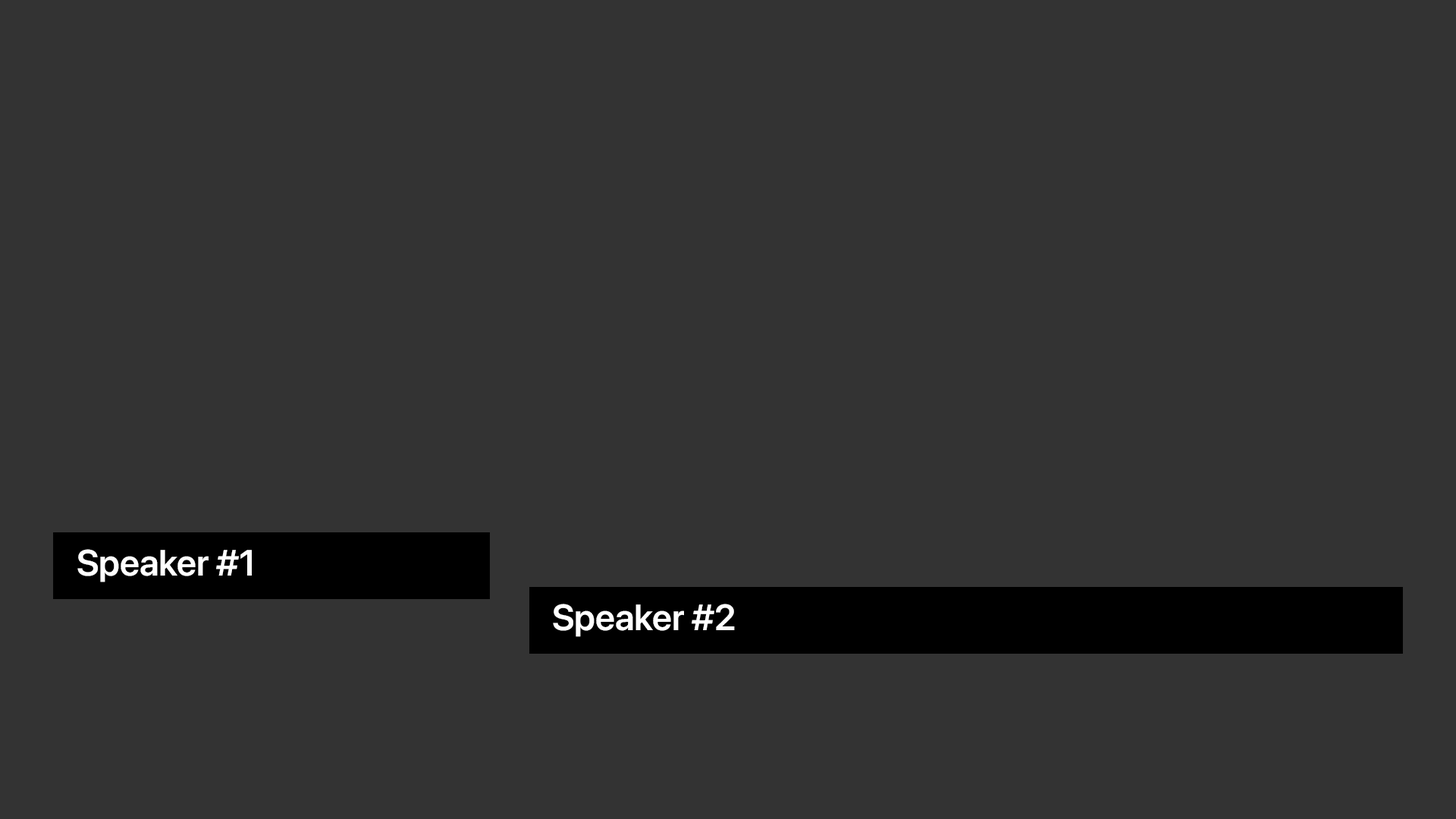
<style>
.page{position:relative;width:1456px;height:819px;background:#333333}
.page>*{position:absolute;margin:0}
.t1{font:36.4px "SFProDisplay-Semibold";color:#ffffff}
</style>
<div class="page">
<p class="t1" style="left:77px;top:549px;width:175px;height:33px">Speaker #1</p>
<p class="t1" style="left:553px;top:604px;width:182px;height:33px">Speaker #2</p>
</div>
